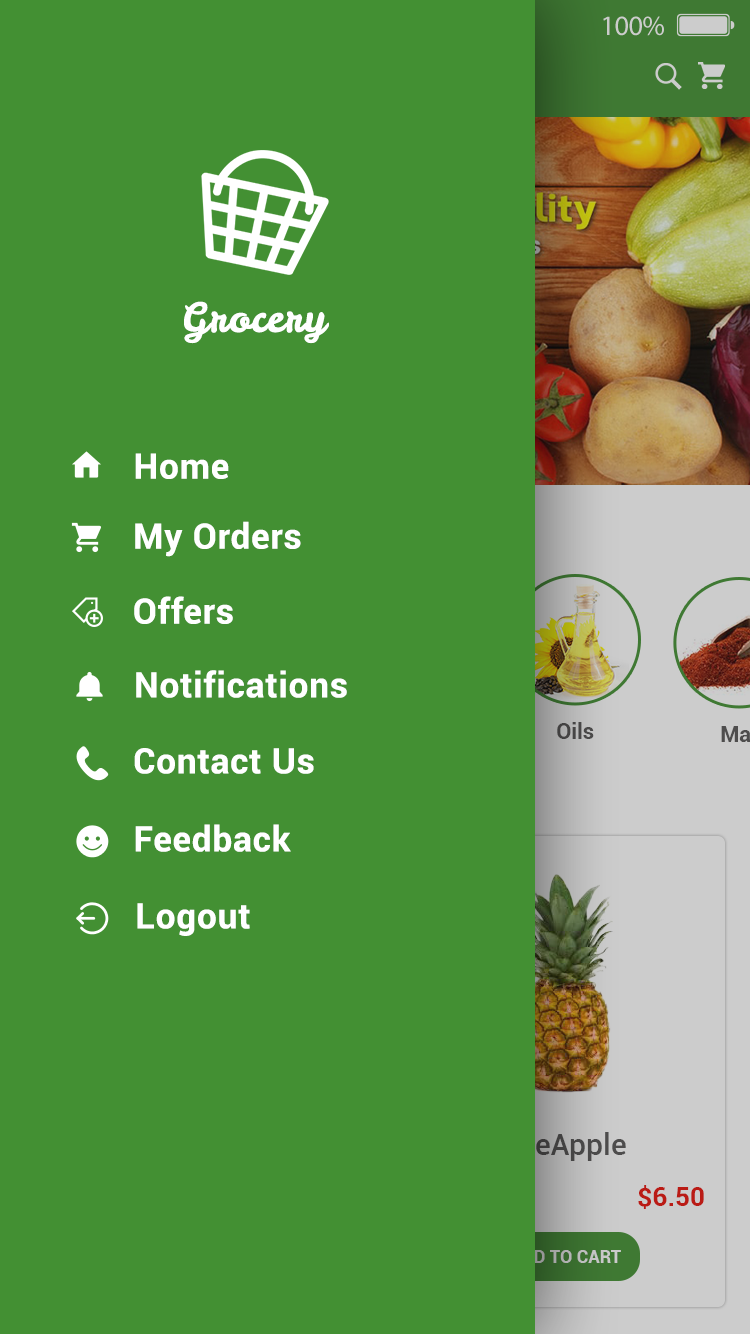
<style>
.page{position:relative;width:750px;height:1334px;background:#439033}
.page>*{position:absolute;margin:0}
.t1{font:40px "LeckerliOne-Regular";letter-spacing:0.025em;color:#ffffff}
.t2{font:35px "Roboto-Bold";letter-spacing:0.025em;color:#ffffff}
</style>
<div class="page">
<p class="t1" style="left:184px;top:301px;width:145px;height:43px">Grocery</p>
<p class="t2" style="left:135px;top:453px;width:94px;height:26px">Home</p>
<p class="t2" style="left:135px;top:521px;width:166px;height:36px">My Orders</p>
<p class="t2" style="left:134px;top:596px;width:99px;height:28px">Offers</p>
<p class="t2" style="left:136px;top:670px;width:211px;height:28px">Notifications</p>
<p class="t2" style="left:134px;top:748px;width:180px;height:26px">Contact Us</p>
<p class="t2" style="left:135px;top:824px;width:156px;height:28px">Feedback</p>
<p class="t2" style="left:137px;top:903px;width:113px;height:33px">Logout</p>
</div>
